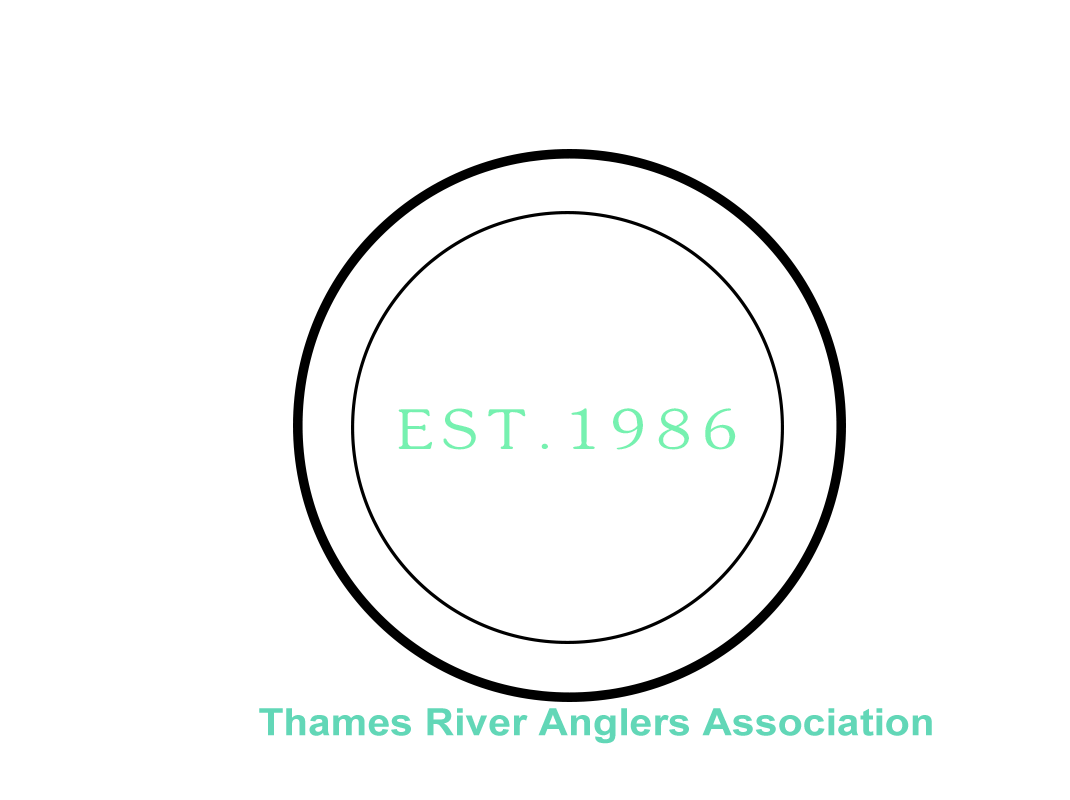
<style>
.page{position:relative;width:1070px;height:800px;background:#ffffff}
.page>*{position:absolute;margin:0}
.t1{font:54.3px "GJJXKJW--GB1-0";letter-spacing:0.18em;color:#76f1b0;scale:1.09 1}
.t2{font:37.7px "Arial-BoldMT";color:#62d7b7;scale:1.09 1}
</style>
<div class="page">
<p class="t1" style="left:398px;top:408px;width:338px;height:42px">EST.1986</p>
<p class="t2" style="left:259px;top:708px;width:673px;height:36px">Thames River Anglers Association</p>
</div>
